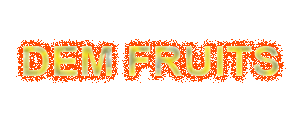
<style>
.page{position:relative;width:300px;height:128px;background:#ffffff}
.page>*{position:absolute;margin:0}
.t1{font:42.1px "Arial-BoldMT"}
</style>
<div class="page">
<p class="t1" style="left:23px;top:46px;width:256px;height:30px">DEM FRUITS</p>
</div>
